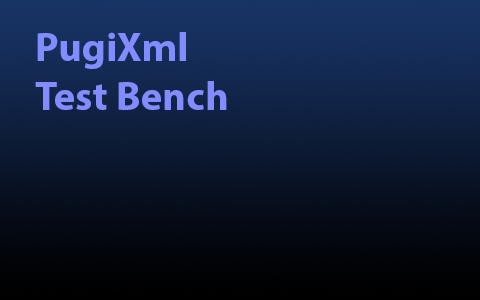
<style>
.page{position:relative;width:480px;height:300px}
.page>*{position:absolute;margin:0}
.t1{font:40.6px "MyriadPro-Bold";color:#838cff}
</style>
<div class="page">
<p class="t1" style="left:35px;top:32px;width:192px;height:78px">PugiXml<br>Test Bench</p>
</div>
